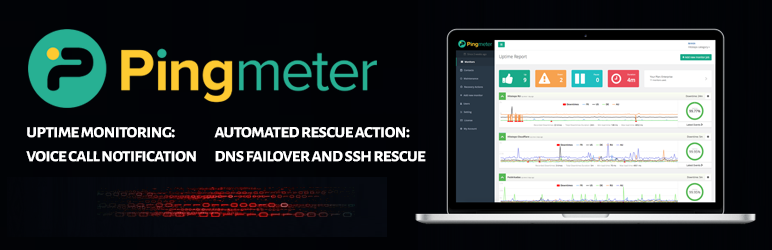
<style>
.page{position:relative;width:772px;height:250px;background:#010306}
.page>*{position:absolute;margin:0}
.t1{font:20px "AlegreyaSansSC-Bold";letter-spacing:-0.05em;color:#ffffff}
</style>
<div class="page">
<p class="t1" style="left:26px;top:127px;width:400px;height:35px">uptime monitoring:     automated rescue action:<br>voice call notification     dns failover and ssh rescue</p>
</div>
